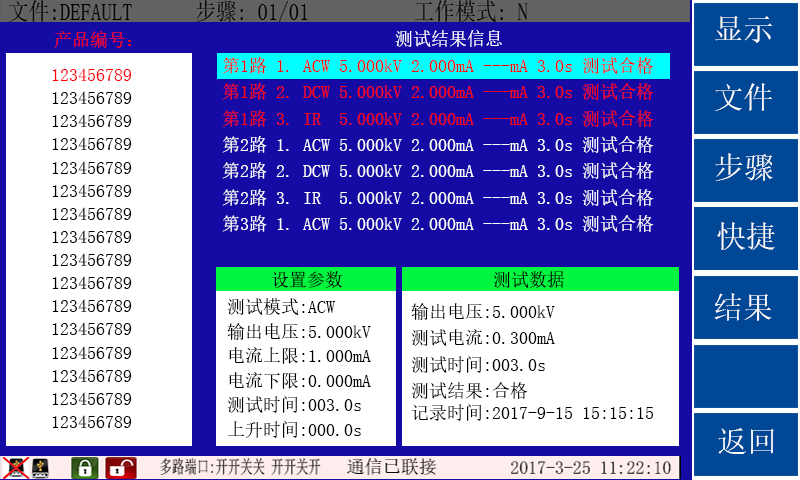
<style>
.page{position:relative;width:800px;height:480px;background:#ffffff}
.page>*{position:absolute;margin:0}
.t1{font:18px "SimSun";color:#ffffff}
.t2{font:18px "SimSun";color:#fc0208}
.t3{font:18px "SimSun";color:#fb0202}
.t4{font:18px "SimSun";color:#fb0606}
.t5{font:18px "SimSun";color:#000000}
.t6{font:18px "SimSun";color:#f60707}
.t7{font:18px "SimSun";color:#000401}
</style>
<div class="page">
<p class="t1" style="left:395px;top:30px;width:107px;height:17px">测试结果信息</p>
<p class="t2" style="left:54px;top:31px;width:77px;height:17px">产品编号：</p>
<p class="t3" style="left:222px;top:57px;width:432px;height:17px">第1路 1. ACW 5.000kV 2.000mA ---mA 3.0s 测试合格</p>
<p class="t2" style="left:52px;top:68px;width:80px;height:13px">123456789</p>
<p class="t4" style="left:222px;top:83px;width:432px;height:17px">第1路 2. DCW 5.000kV 2.000mA ---mA 3.0s 测试合格</p>
<p class="t5" style="left:52px;top:91px;width:80px;height:13px">123456789</p>
<p class="t6" style="left:222px;top:110px;width:432px;height:17px">第1路 3. IR  5.000kV 2.000mA ---mA 3.0s 测试合格</p>
<p class="t5" style="left:52px;top:114px;width:80px;height:13px">123456789</p>
<p class="t5" style="left:52px;top:137px;width:80px;height:13px">123456789</p>
<p class="t1" style="left:222px;top:136px;width:432px;height:17px">第2路 1. ACW 5.000kV 2.000mA ---mA 3.0s 测试合格</p>
<p class="t5" style="left:52px;top:161px;width:80px;height:13px">123456789</p>
<p class="t1" style="left:222px;top:162px;width:432px;height:17px">第2路 2. DCW 5.000kV 2.000mA ---mA 3.0s 测试合格</p>
<p class="t5" style="left:52px;top:184px;width:80px;height:13px">123456789</p>
<p class="t1" style="left:222px;top:189px;width:432px;height:17px">第2路 3. IR  5.000kV 2.000mA ---mA 3.0s 测试合格</p>
<p class="t5" style="left:52px;top:207px;width:80px;height:13px">123456789</p>
<p class="t1" style="left:222px;top:215px;width:432px;height:17px">第3路 1. ACW 5.000kV 2.000mA ---mA 3.0s 测试合格</p>
<p class="t5" style="left:52px;top:230px;width:80px;height:13px">123456789</p>
<p class="t5" style="left:52px;top:253px;width:80px;height:13px">123456789</p>
<p class="t5" style="left:52px;top:276px;width:80px;height:13px">123456789</p>
<p class="t7" style="left:272px;top:271px;width:71px;height:17px">设置参数</p>
<p class="t7" style="left:493px;top:271px;width:71px;height:17px">测试数据</p>
<p class="t5" style="left:52px;top:299px;width:80px;height:13px">123456789</p>
<p class="t5" style="left:227px;top:298px;width:108px;height:17px">测试模式:ACW</p>
<p class="t5" style="left:411px;top:303px;width:144px;height:17px">输出电压:5.000kV</p>
<p class="t5" style="left:52px;top:322px;width:80px;height:13px">123456789</p>
<p class="t5" style="left:227px;top:323px;width:144px;height:17px">输出电压:5.000kV</p>
<p class="t5" style="left:411px;top:329px;width:144px;height:17px">测试电流:0.300mA</p>
<p class="t5" style="left:52px;top:346px;width:80px;height:13px">123456789</p>
<p class="t5" style="left:229px;top:347px;width:142px;height:17px">电流上限:1.000mA</p>
<p class="t5" style="left:411px;top:356px;width:134px;height:17px">测试时间:003.0s</p>
<p class="t5" style="left:52px;top:369px;width:80px;height:13px">123456789</p>
<p class="t5" style="left:229px;top:372px;width:142px;height:17px">电流下限:0.000mA</p>
<p class="t5" style="left:411px;top:382px;width:117px;height:17px">测试结果:合格</p>
<p class="t5" style="left:52px;top:392px;width:80px;height:13px">123456789</p>
<p class="t5" style="left:227px;top:396px;width:134px;height:17px">测试时间:003.0s</p>
<p class="t5" style="left:411px;top:404px;width:242px;height:17px">记录时间:2017-9-15 15:15:15</p>
<p class="t5" style="left:52px;top:415px;width:80px;height:13px">123456789</p>
<p class="t5" style="left:227px;top:421px;width:134px;height:17px">上升时间:000.0s</p>
</div>
